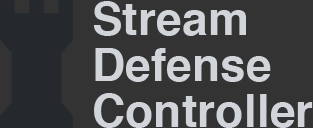
<style>
.page{position:relative;width:313px;height:128px;background:#333333}
.page>*{position:absolute;margin:0}
.t1{font:46px/46px "Helvetica-Bold";letter-spacing:0.005em;color:#d1d5da}
</style>
<div class="page">
<p class="t1" style="left:93px;top:1px;width:220px;height:127px">Stream<br>Defense<br>Controller</p>
</div>
